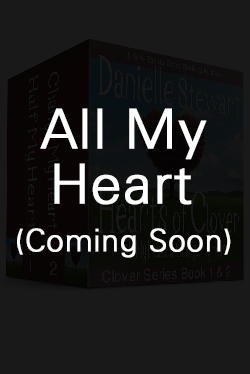
<style>
.page{position:relative;width:250px;height:374px;background:#191919}
.page>*{position:absolute;margin:0}
.t1{font:31px/48px "Univers-Light";letter-spacing:0.01em;color:#ffffff;font-weight:bold}
.t2{font:55px "Univers-Light";letter-spacing:0.01em;color:#ffffff;font-weight:bold}
.t3{font:55px/55px "Univers-Light";letter-spacing:0.01em;color:#ffffff;font-weight:bold}
</style>
<div class="page">
<p class="t1" style="left:17px;top:108px;width:214px;height:150px;text-align:center"><span class="t2">All My<br></span><span class="t3">Heart<br></span>(Coming Soon)</p>
</div>
